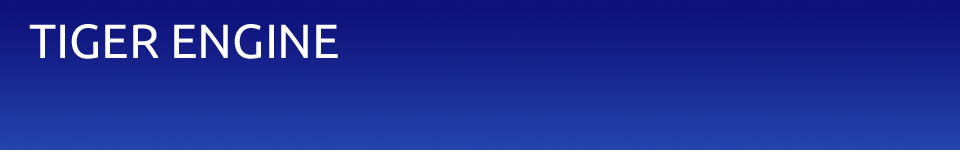
<style>
.page{position:relative;width:960px;height:150px}
.page>*{position:absolute;margin:0}
.t1{font:48px "Ubuntu";color:#ffffff}
</style>
<div class="page">
<p class="t1" style="left:29px;top:24px;width:309px;height:35px">TIGER ENGINE</p>
</div>
